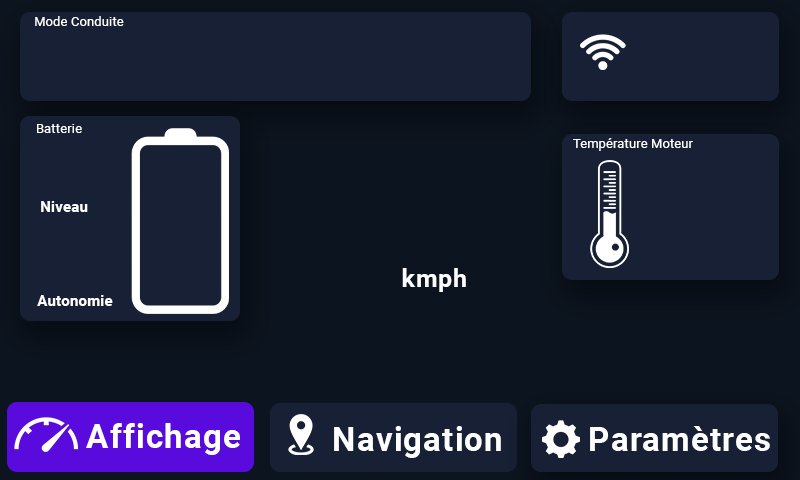
<style>
.page{position:relative;width:800px;height:480px;background:#182035}
.page>*{position:absolute;margin:0}
.t1{font:12.5px "Roboto-Regular";letter-spacing:0.03em;color:#ffffff}
.t2{font:14.6px "Roboto-Bold";letter-spacing:0.03em;color:#ffffff}
.t3{font:25px "Roboto-Bold";letter-spacing:0.03em;color:#ffffff}
.t4{font:33.4px "Roboto-Bold";letter-spacing:0.03em;color:#ffffff}
</style>
<div class="page">
<p class="t1" style="left:35px;top:16px;width:89px;height:10px">Mode Conduite</p>
<p class="t1" style="left:37px;top:124px;width:45px;height:9px">Batterie</p>
<p class="t1" style="left:573px;top:138px;width:120px;height:13px">Température Moteur</p>
<p class="t2" style="left:41px;top:201px;width:47px;height:11px">Niveau</p>
<p class="t3" style="left:402px;top:268px;width:64px;height:24px">kmph</p>
<p class="t2" style="left:37px;top:295px;width:76px;height:11px">Autonomie</p>
<p class="t4" style="left:86px;top:423px;width:154px;height:32px">Affichage</p>
<p class="t4" style="left:334px;top:426px;width:167px;height:32px">Navigation</p>
<p class="t4" style="left:590px;top:426px;width:180px;height:25px">Paramètres</p>
</div>
